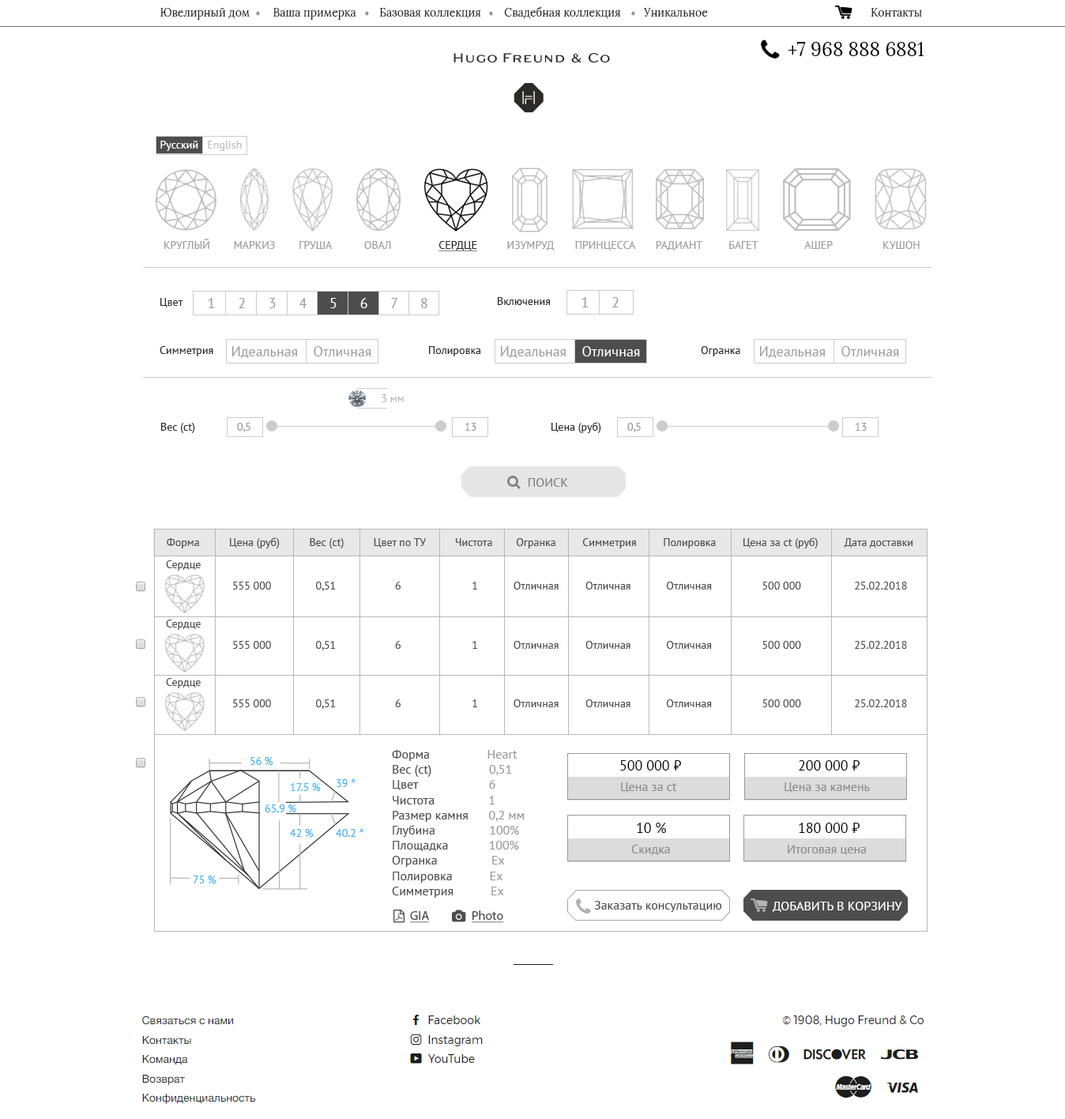
<style>
.page{position:relative;width:1065px;height:1119px;background:#ffffff}
.page>*{position:absolute;margin:0}
.t1{font:11.1px "Lora-Regular";color:#2b2a29}
.t2{font:19px "Lora-Regular";color:#000000}
.t3{font:11.1px "PTSans-Regular";color:#9e9e9e}
.t4{font:11.1px "PTSans-Regular";color:#2b2a29;text-decoration:underline}
.t5{font:11.1px "PTSans-Regular";color:#2b2a29}
.t6{font:14.2px "PTSans-Regular";color:#9b9b9b}
.t7{font:11.1px "PTSans-Regular";color:#b8b8b8}
.t8{font:11.1px "PTSans-Regular";color:#999999}
.t9{font:11.1px "PTSans-Regular";color:#4d4d4d}
.t10{font:11.1px "PTSans-Regular";color:#37b0f9}
.t11{font:12.6px "PTSans-Regular";color:#4d4d4d}
.t12{font:12.6px "PTSans-Regular";color:#999999}
.t13{font:14.2px "PTSans-Regular";color:#000000}
.t14{font:12.6px "PTSans-Regular";color:#8b8b8b}
.t15{font:12.6px "PTSans-Regular";color:#ffffff}
.t16{font:12.6px "MyriadPro-Regular";color:#4d4d4d;text-decoration:underline}
</style>
<div class="page">
<p class="t1" style="left:160px;top:6px;width:762px;height:14px">Ювелирный дом        Ваша примерка        Базовая коллекция        Свадебная коллекция        Уникальное                                                        Контакты</p>
<p class="t2" style="left:788px;top:42px;width:136px;height:14px">+7 968 888 6881</p>
<p class="t3" style="left:164px;top:239px;width:756px;height:12px">КРУГЛЫЙ        МАРКИЗ        ГРУША           ОВАЛ                <span class="t4">СЕРДЦЕ          </span>ИЗУМРУД       ПРИНЦЕССА       РАДИАНТ         БАГЕТ                АШЕР                 КУШОН</p>
<p class="t5" style="left:160px;top:298px;width:23px;height:9px">Цвет</p>
<p class="t5" style="left:498px;top:297px;width:53px;height:8px">Включения</p>
<p class="t6" style="left:582px;top:297px;width:37px;height:10px">1      2</p>
<p class="t5" style="left:160px;top:346px;width:53px;height:10px">Симметрия</p>
<p class="t6" style="left:232px;top:346px;width:139px;height:12px">Идеальная    Отличная</p>
<p class="t5" style="left:429px;top:346px;width:52px;height:10px">Полировка</p>
<p class="t5" style="left:701px;top:346px;width:40px;height:10px">Огранка</p>
<p class="t6" style="left:760px;top:346px;width:139px;height:12px">Идеальная    Отличная</p>
<p class="t7" style="left:382px;top:394px;width:22px;height:8px">3 мм</p>
<p class="t5" style="left:161px;top:423px;width:34px;height:10px">Вес (ct)</p>
<p class="t8" style="left:237px;top:423px;width:14px;height:9px">0,5</p>
<p class="t8" style="left:465px;top:423px;width:12px;height:8px">13</p>
<p class="t5" style="left:552px;top:422px;width:49px;height:11px">Цена (руб)</p>
<p class="t8" style="left:628px;top:423px;width:13px;height:9px">0,5</p>
<p class="t8" style="left:855px;top:423px;width:12px;height:8px">13</p>
<p class="t9" style="left:167px;top:537px;width:746px;height:12px">Форма          Цена (руб)          Вес (ct)          Цвет по ТУ          Чистота        Огранка         Симметрия         Полировка         Цена за ct (руб)         Дата доставки</p>
<p class="t9" style="left:166px;top:560px;width:35px;height:11px">Сердце</p>
<p class="t9" style="left:233px;top:582px;width:674px;height:9px">555 000               0,51                    6                        1            Отличная         Отличная            Отличная                 500 000                  25.02.2018</p>
<p class="t9" style="left:166px;top:620px;width:35px;height:10px">Сердце</p>
<p class="t9" style="left:233px;top:641px;width:674px;height:9px">555 000               0,51                    6                        1            Отличная         Отличная            Отличная                 500 000                  25.02.2018</p>
<p class="t9" style="left:166px;top:678px;width:35px;height:10px">Сердце</p>
<p class="t9" style="left:233px;top:699px;width:674px;height:10px">555 000               0,51                    6                        1            Отличная         Отличная            Отличная                 500 000                  25.02.2018</p>
<p class="t10" style="left:251px;top:757px;width:22px;height:8px">56 %</p>
<p class="t11" style="left:392px;top:750px;width:132px;height:148px">Форма                 <span class="t12">Heart<br></span>Вес (ct)                <span class="t12"> 0,51<br></span>Цвет                     <span class="t12">6</span> <br>Чистота                <span class="t12">1<br></span>Размер камня      <span class="t12">0,2 мм<br></span>Глубина                <span class="t12">100%<br></span>Площадка            <span class="t12">100%<br></span>Огранка                <span class="t12">Ex<br></span>Полировка           <span class="t12">Ex<br></span>Симметрия           <span class="t12">Ex</span></p>
<p class="t13" style="left:620px;top:760px;width:61px;height:11px">500 000 ₽</p>
<p class="t13" style="left:799px;top:760px;width:61px;height:11px">200 000 ₽</p>
<p class="t10" style="left:290px;top:783px;width:31px;height:8px">17.5 %</p>
<p class="t10" style="left:337px;top:779px;width:19px;height:8px">39 °</p>
<p class="t14" style="left:621px;top:782px;width:56px;height:11px">Цена за ct</p>
<p class="t14" style="left:785px;top:782px;width:85px;height:11px">Цена за камень</p>
<p class="t10" style="left:265px;top:805px;width:31px;height:8px">65.9 %</p>
<p class="t10" style="left:290px;top:829px;width:24px;height:8px">42 %</p>
<p class="t10" style="left:336px;top:829px;width:28px;height:8px">40.2 °</p>
<p class="t13" style="left:637px;top:823px;width:29px;height:10px">10 %</p>
<p class="t13" style="left:799px;top:823px;width:61px;height:10px">180 000 ₽</p>
<p class="t14" style="left:632px;top:845px;width:38px;height:10px">Скидка</p>
<p class="t14" style="left:788px;top:845px;width:78px;height:10px">Итоговая цена</p>
<p class="t10" style="left:193px;top:876px;width:24px;height:8px">75 %</p>
<p class="t11" style="left:594px;top:901px;width:128px;height:11px">Заказать консультацию</p>
<p class="t15" style="left:773px;top:902px;width:130px;height:10px">ДОБАВИТЬ В КОРЗИНУ</p>
<p class="t16" style="left:410px;top:911px;width:19px;height:12px">GIA</p>
<p class="t16" style="left:472px;top:911px;width:32px;height:12px">Photo</p>
</div>
